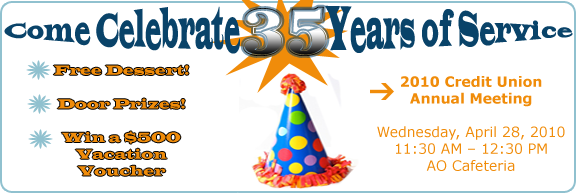
<style>
.page{position:relative;width:577px;height:193px;background:#ffffff}
.page>*{position:absolute;margin:0}
.t1{font:15.3px "LatinWide";color:#094369;scale:1.18 1}
.t2{font:61px "ChellChromeBold";scale:1.18 1}
.t3{font:14px "LatinWide";color:#f08c0a;scale:0.86 1}
.t4{font:14px "Verdana";color:#f08c0a}
.t5{font:14px "Verdana-Bold";color:#f08c0a}
</style>
<div class="page">
<p class="t1" style="left:4px;top:5px;width:569px;height:49px;text-align:center">Come Celebrate                Years of Service</p>
<p class="t2" style="left:242px;top:6px;width:86px;height:50px">35</p>
<p class="t3" style="left:53px;top:65px;width:136px;height:111px;text-align:center">Free Dessert!<br><br>Door Prizes!<br><br>Win a $500<br>Vacation Voucher</p>
<p class="t4" style="left:377px;top:76px;width:188px;height:95px;text-align:center"><span class="t5">2010 Credit Union Annual Meeting<br><br></span>Wednesday, April 28, 2010<br>11:30 AM – 12:30 PM<br>AO Cafeteria</p>
</div>
